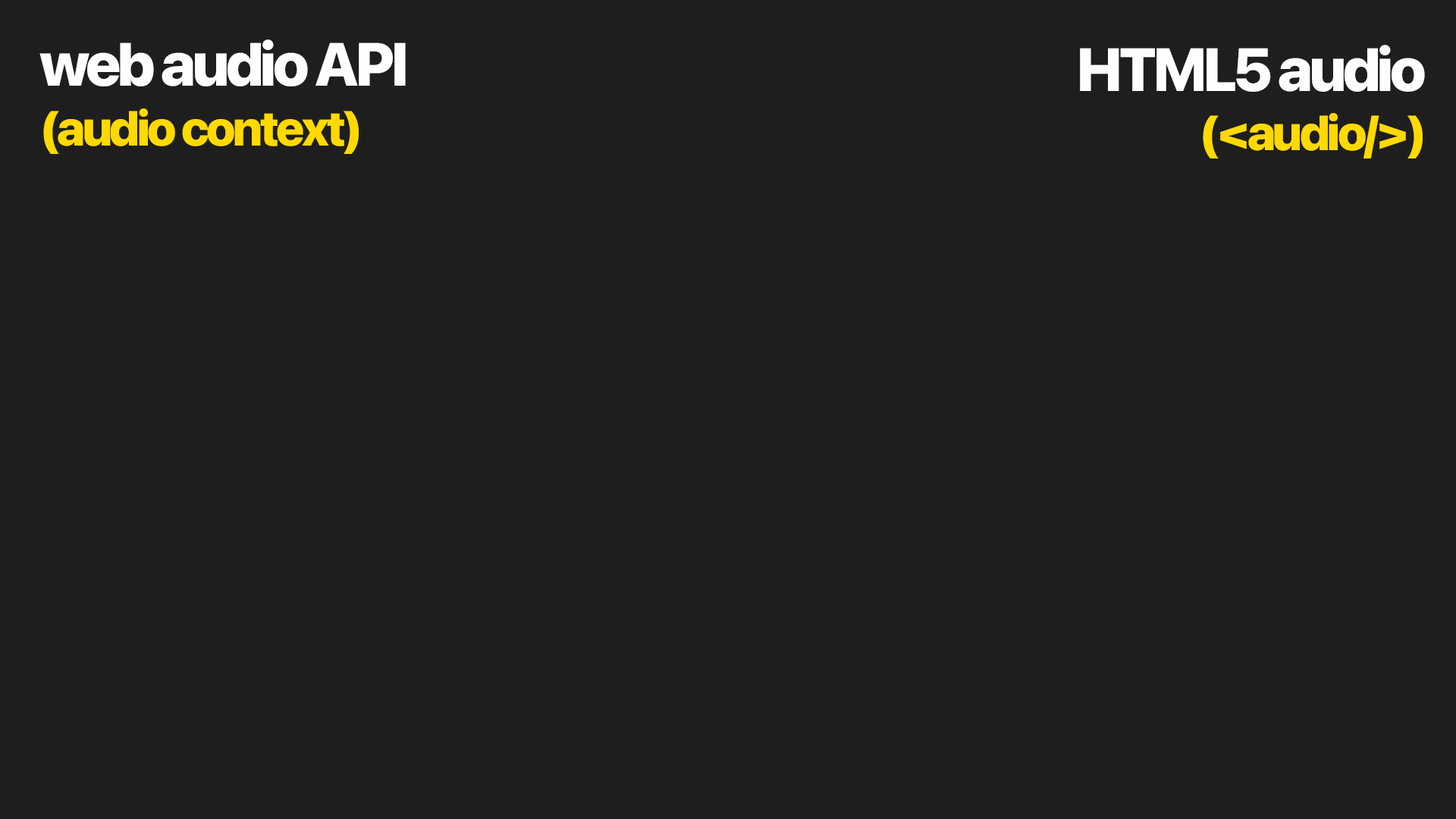
<style>
.page{position:relative;width:1456px;height:819px;background:#1e1e1e}
.page>*{position:absolute;margin:0}
.t1{font:60.6px "SFPro-Heavy";letter-spacing:-0.05em;color:#fefefe}
.t2{font:48.9px "SFPro-Heavy";letter-spacing:-0.05em;color:#ffd900}
</style>
<div class="page">
<p class="t1" style="left:39px;top:39px;width:367px;height:47px">web audio API</p>
<p class="t1" style="left:1080px;top:45px;width:345px;height:47px">HTML5 audio</p>
<p class="t2" style="left:43px;top:108px;width:316px;height:46px">(audio context)</p>
<p class="t2" style="left:1203px;top:113px;width:220px;height:45px">(&lt;audio/&gt;)</p>
</div>
